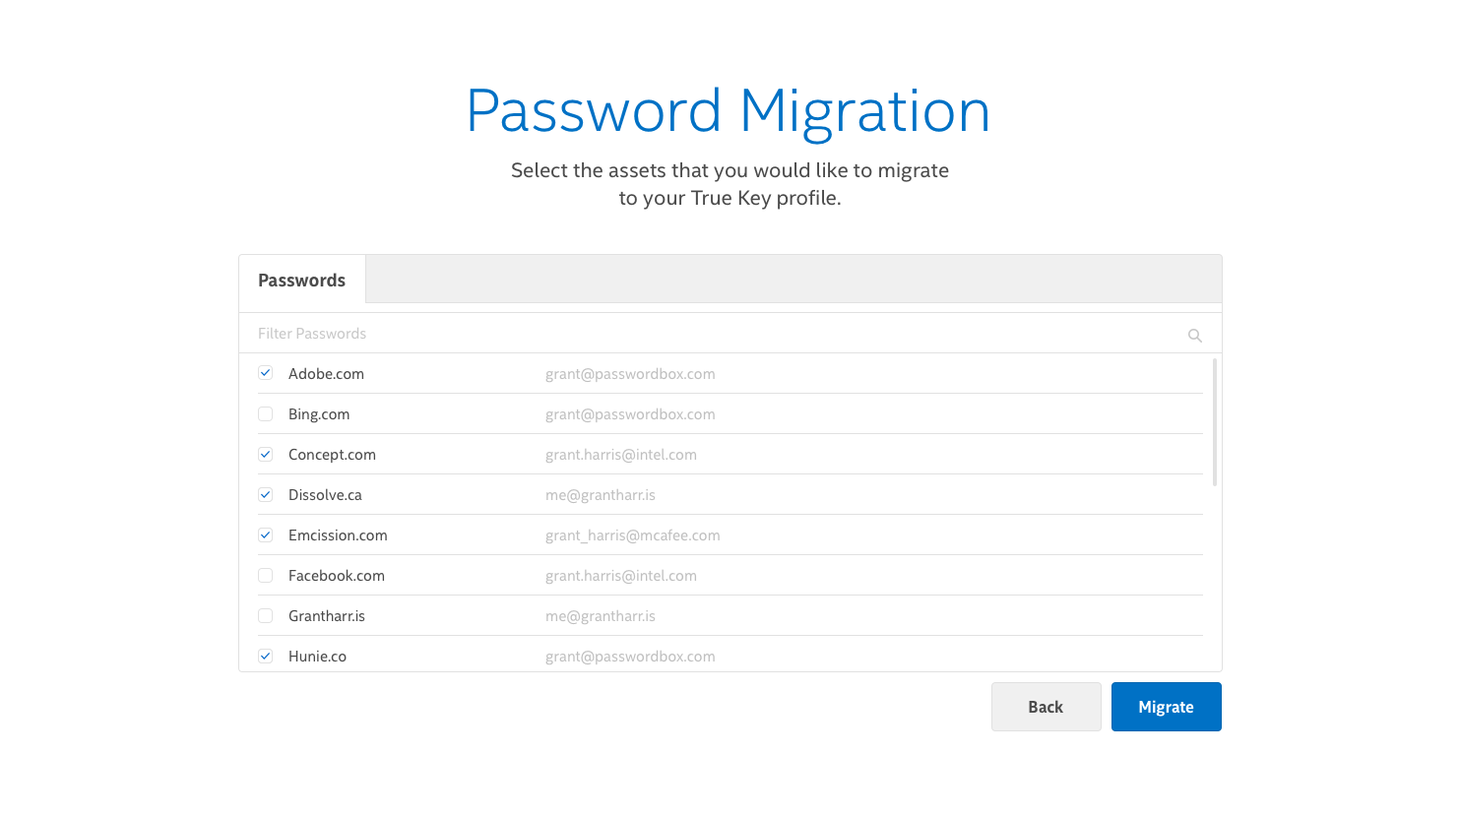
<style>
.page{position:relative;width:1460px;height:817px;background:#ffffff}
.page>*{position:absolute;margin:0}
.t1{font:61px "IntelClear-Light";color:#0071c5}
.t2{font:20.7px/27.6px "IntelClear-Regular";color:#4b4b4b}
.t3{font:17.7px "IntelClear-Bold";color:#4b4b4b}
.t4{font:14.8px "IntelClear-Regular";color:#c8c8c8}
.t5{font:14.8px "IntelClear-Regular";color:#4b4b4b}
.t6{font:14.8px "IntelClear-Regular";color:#c0c0c0}
.t7{font:15.7px "IntelClear-Bold";color:#4b4b4b}
.t8{font:15.7px "IntelClear-Bold";color:#ffffff}
</style>
<div class="page">
<p class="t1" style="left:469px;top:87px;width:518px;height:58px">Password Migration</p>
<p class="t2" style="left:511px;top:161px;width:438px;height:49px;text-align:center">Select the assets that you would like to migrate<br>to your True Key profile.</p>
<p class="t3" style="left:259px;top:273px;width:86px;height:14px">Passwords</p>
<p class="t4" style="left:259px;top:327px;width:107px;height:13px">Filter Passwords</p>
<p class="t5" style="left:288px;top:367px;width:76px;height:13px">Adobe.com</p>
<p class="t6" style="left:545px;top:367px;width:170px;height:16px">grant@passwordbox.com</p>
<p class="t5" style="left:289px;top:407px;width:60px;height:16px">Bing.com</p>
<p class="t6" style="left:545px;top:407px;width:170px;height:16px">grant@passwordbox.com</p>
<p class="t5" style="left:288px;top:448px;width:88px;height:16px">Concept.com</p>
<p class="t6" style="left:545px;top:448px;width:152px;height:16px">grant.harris@intel.com</p>
<p class="t5" style="left:289px;top:488px;width:73px;height:13px">Dissolve.ca</p>
<p class="t6" style="left:546px;top:488px;width:110px;height:16px">me@grantharr.is</p>
<p class="t5" style="left:289px;top:529px;width:98px;height:12px">Emcission.com</p>
<p class="t6" style="left:545px;top:529px;width:174px;height:15px">grant_harris@mcafee.com</p>
<p class="t5" style="left:289px;top:569px;width:96px;height:13px">Facebook.com</p>
<p class="t6" style="left:545px;top:569px;width:152px;height:16px">grant.harris@intel.com</p>
<p class="t5" style="left:288px;top:609px;width:77px;height:13px">Grantharr.is</p>
<p class="t6" style="left:546px;top:609px;width:110px;height:16px">me@grantharr.is</p>
<p class="t5" style="left:289px;top:650px;width:57px;height:12px">Hunie.co</p>
<p class="t6" style="left:545px;top:650px;width:170px;height:15px">grant@passwordbox.com</p>
<p class="t7" style="left:1029px;top:700px;width:34px;height:14px">Back</p>
<p class="t8" style="left:1139px;top:700px;width:55px;height:17px">Migrate</p>
</div>
